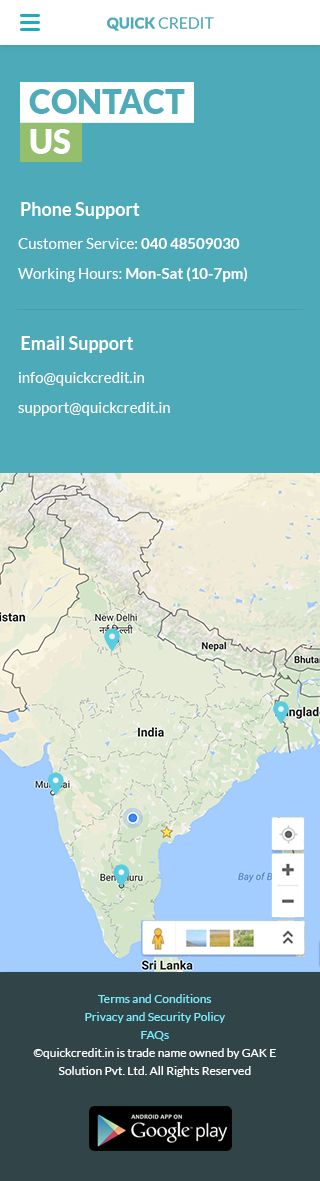
<style>
.page{position:relative;width:320px;height:1181px;background:#4daab9}
.page>*{position:absolute;margin:0}
.t1{font:18px "Lato-Bold";color:#ffffff}
.t2{font:15px/30px "Lato-Regular";color:#ffffff}
.t3{font:15px/30px "Lato-Bold";color:#ffffff}
.t4{font:12px/18px "Lato-Regular";color:#ffffff}
.t5{font:12px/18px "Lato-Regular";color:#7cebfc}
</style>
<div class="page">
<p class="t1" style="left:21px;top:202px;width:119px;height:17px">Phone Support</p>
<p class="t2" style="left:18px;top:238px;width:230px;height:44px">Customer Service: <span class="t3">040 48509030<br></span>Working Hours: <span class="t3">Mon-Sat (10-7pm)</span></p>
<p class="t1" style="left:21px;top:336px;width:112px;height:17px">Email Support</p>
<p class="t2" style="left:18px;top:372px;width:152px;height:44px">info@quickcredit.in<br>support@quickcredit.in</p>
<p class="t4" style="left:33px;top:994px;width:243px;height:83px;text-align:center"><span class="t5">Terms and Conditions        <br>Privacy and Security Policy         <br>FAQs<br></span>©quickcredit.in is trade name owned by GAK E Solution Pvt. Ltd. All Rights Reserved</p>
</div>
